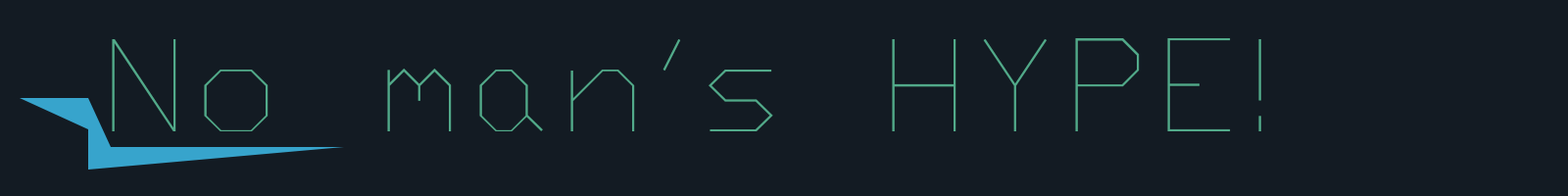
<style>
.page{position:relative;width:1568px;height:196px;background:#131b23}
.page>*{position:absolute;margin:0}
.t1{font:127.4px "Txt";color:#52aa8a}
</style>
<div class="page">
<p class="t1" style="left:112px;top:38px;width:1149px;height:93px">No man’s HYPE!</p>
</div>
